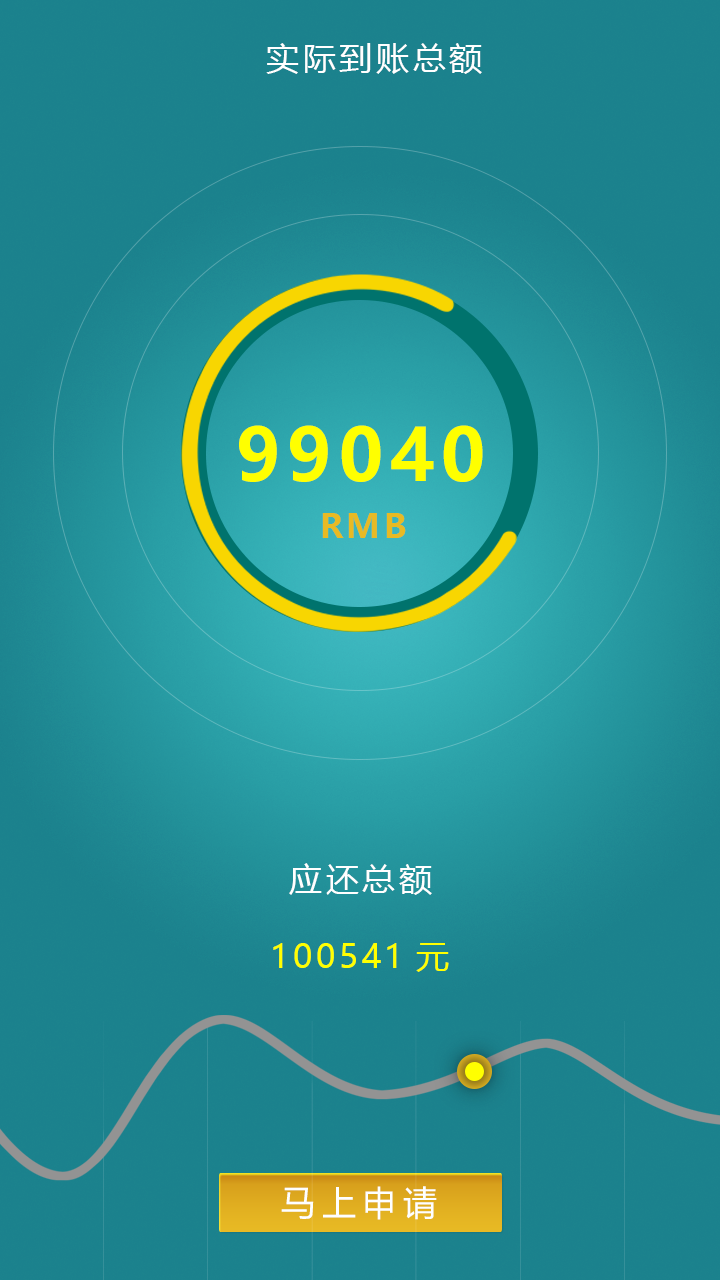
<style>
.page{position:relative;width:720px;height:1280px}
.page>*{position:absolute;margin:0}
.t1{font:33.3px "MicrosoftYaHei";letter-spacing:0.1em;color:#ffffff}
.t2{font:71.9px "MicrosoftYaHei-Bold";letter-spacing:0.1em;color:#ffff00}
.t3{font:33.3px "MicrosoftYaHei-Bold";letter-spacing:0.1em;color:#e8ba24}
.t4{font:33.3px "MicrosoftYaHei";letter-spacing:0.1em;color:#ffff00}
.t5{font:34.4px "MicrosoftYaHei";letter-spacing:0.2em;color:#feffff}
</style>
<div class="page">
<p class="t1" style="left:266px;top:43px;width:216px;height:31px">实际到账总额</p>
<p class="t2" style="left:239px;top:425px;width:244px;height:57px">99040</p>
<p class="t3" style="left:322px;top:513px;width:84px;height:25px">RMB</p>
<p class="t1" style="left:289px;top:863px;width:143px;height:32px">应还总额</p>
<p class="t4" style="left:273px;top:943px;width:176px;height:29px">100541元</p>
<p class="t5" style="left:281px;top:1186px;width:156px;height:34px">马上申请</p>
</div>
